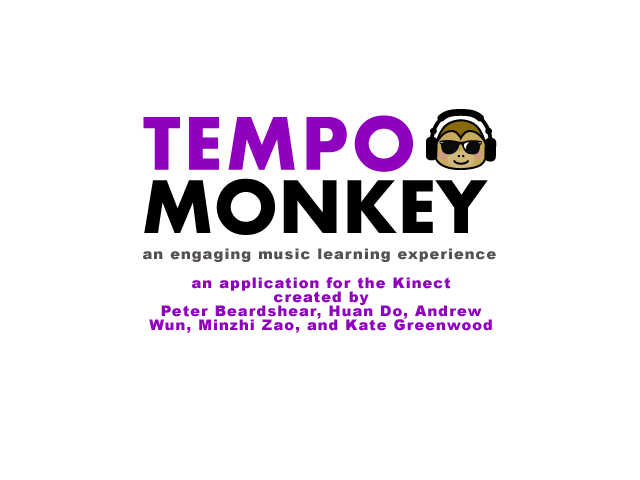
<style>
.page{position:relative;width:640px;height:480px;background:#ffffff}
.page>*{position:absolute;margin:0}
.t1{font:14.4px "Arial-Black";letter-spacing:0.1em;color:#565152}
.t2{font:14.4px/13.1px "Arial-Black";letter-spacing:0.1em;color:#8f00bf}
</style>
<div class="page">
<p class="t1" style="left:143px;top:248px;width:353px;height:14px">an engaging music learning experience</p>
<p class="t2" style="left:149px;top:277px;width:343px;height:56px;text-align:center">an application for the Kinect<br>created by<br>Peter Beardshear, Huan Do, Andrew Wun, Minzhi Zao, and Kate Greenwood</p>
</div>
